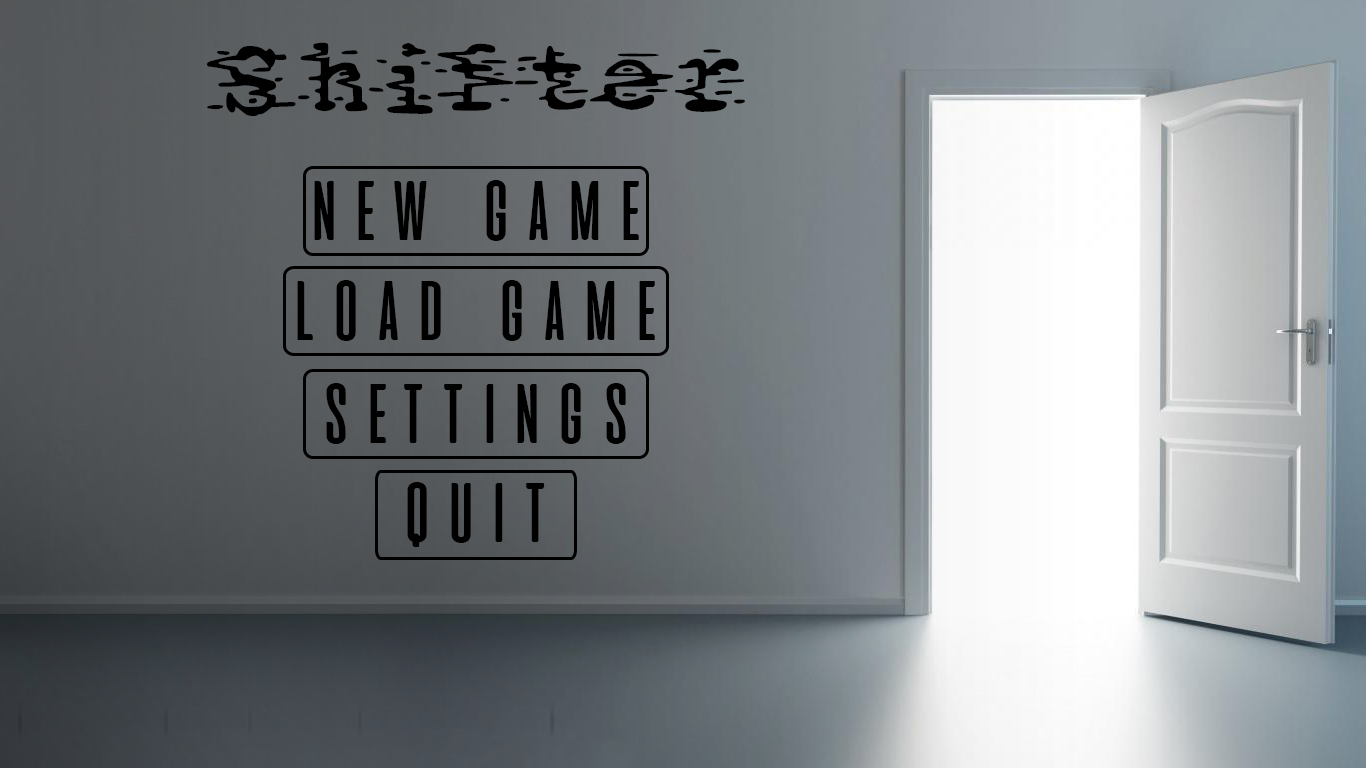
<style>
.page{position:relative;width:1366px;height:768px}
.page>*{position:absolute;margin:0}
.t1{font:100px "Static";color:#000000}
.t2{font:100px "aliensandcows";color:#000000}
</style>
<div class="page">
<p class="t1" style="left:207px;top:42px;width:538px;height:74px">Shifter</p>
<p class="t2" style="left:314px;top:180px;width:325px;height:61px">new game</p>
<p class="t2" style="left:297px;top:280px;width:358px;height:61px">load game</p>
<p class="t2" style="left:326px;top:383px;width:300px;height:61px">settings</p>
<p class="t2" style="left:407px;top:482px;width:138px;height:65px">quit</p>
</div>
